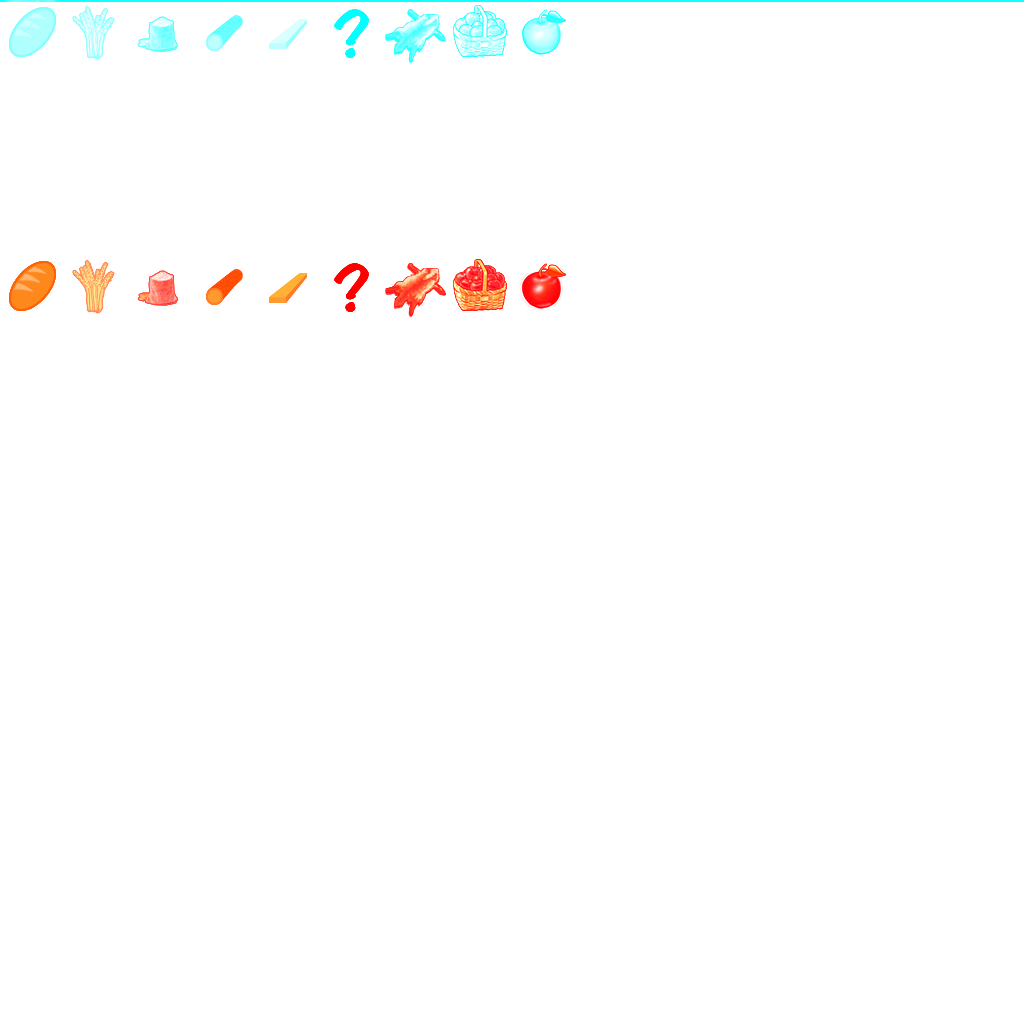
<style>
.page{position:relative;width:1024px;height:1024px;background:#ffffff}
.page>*{position:absolute;margin:0}
.t1{font:64px "Martina";color:#00ffff}
</style>
<div class="page">
<p class="t1" style="left:334px;top:7px;width:35px;height:49px">?</p>
</div>
